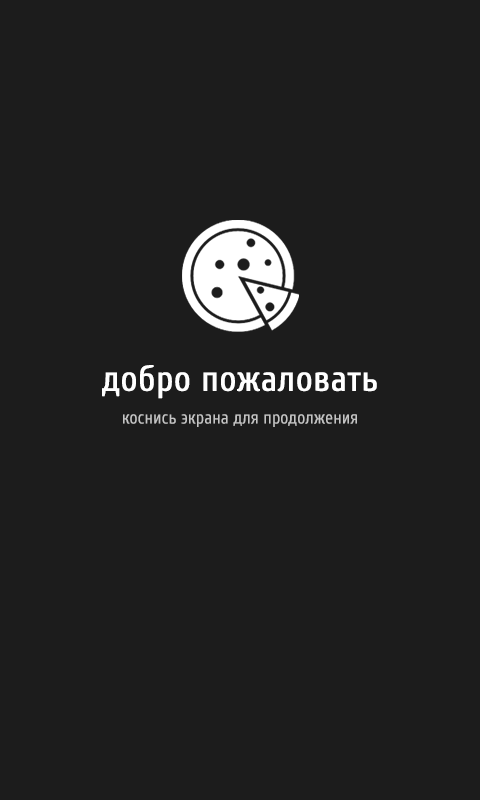
<style>
.page{position:relative;width:480px;height:800px;background:#1c1c1c}
.page>*{position:absolute;margin:0}
.t1{font:36px "Cuprum-Regular";color:#ffffff;font-weight:bold}
.t2{font:18px "Cuprum-Regular";color:#c4c4c4}
</style>
<div class="page">
<p class="t1" style="left:102px;top:365px;width:275px;height:34px">добро пожаловать</p>
<p class="t2" style="left:123px;top:414px;width:234px;height:13px">коснись экрана для продолжения</p>
</div>
